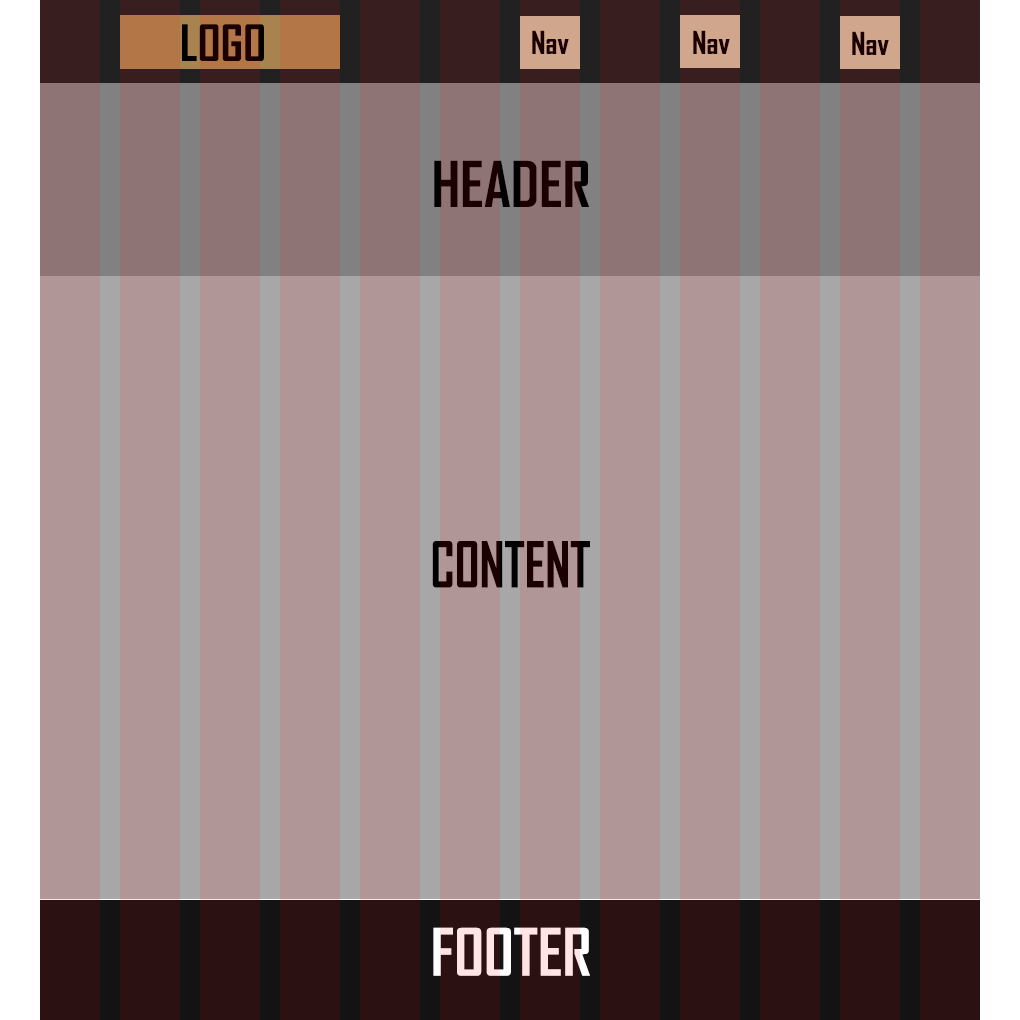
<style>
.page{position:relative;width:1020px;height:1020px;background:#b09696}
.page>*{position:absolute;margin:0}
.t1{font:48px "AgencyFB-Bold";color:#1a0000}
.t2{font:30px "AgencyFB-Bold";color:#1a0000}
.t3{font:60px "AgencyFB-Bold";color:#1a0000}
.t4{font:60.5px "AgencyFB-Bold";color:#1a0000;scale:0.86 1}
.t5{font:62.3px "AgencyFB-Bold";color:#ffe5e5}
</style>
<div class="page">
<p class="t1" style="left:182px;top:24px;width:82px;height:37px">LOGO</p>
<p class="t2" style="left:532px;top:30px;width:37px;height:24px">Nav</p>
<p class="t2" style="left:693px;top:30px;width:37px;height:24px">Nav</p>
<p class="t2" style="left:852px;top:31px;width:37px;height:24px">Nav</p>
<p class="t3" style="left:434px;top:160px;width:155px;height:47px">HEADER</p>
<p class="t4" style="left:432px;top:541px;width:158px;height:47px">CONTENT</p>
<p class="t5" style="left:433px;top:927px;width:157px;height:49px">FOOTER</p>
</div>
